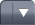
<style>
.page{position:relative;width:35px;height:25px;background:#878f9e}
.page>*{position:absolute;margin:0}
.t1{font:12.8px "ArialMT";letter-spacing:0.1em;color:#ffffff;scale:1.25 1}
</style>
<div class="page">
<p class="t1" style="left:17px;top:8px;width:12px;height:9px">▼</p>
</div>
